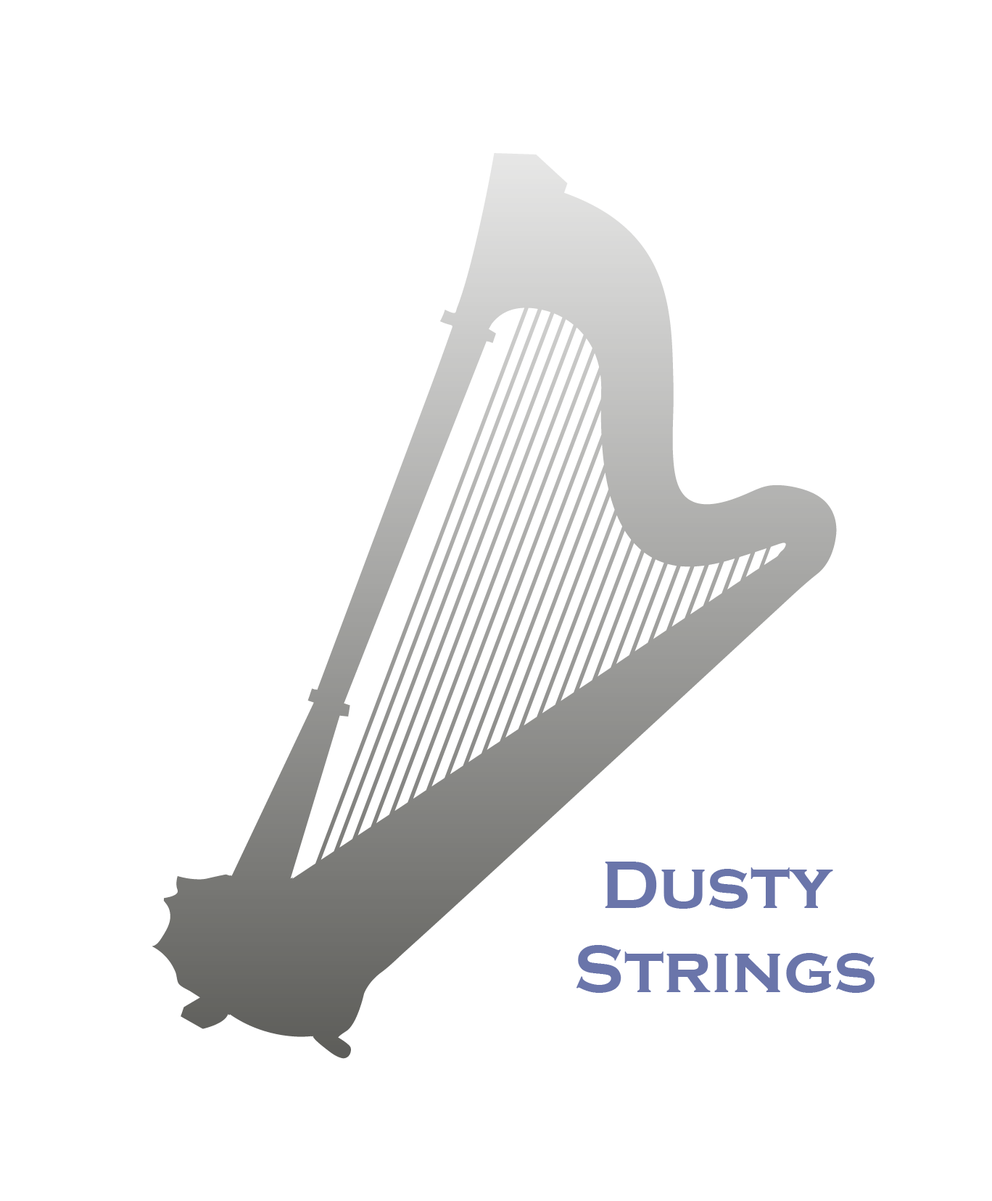
<style>
.page{position:relative;width:992px;height:1201px;background:#ffffff}
.page>*{position:absolute;margin:0}
.t1{font:69.6px "CopperplateGothic-Bold";color:#6a75aa}
</style>
<div class="page">
<p class="t1" style="left:576px;top:862px;width:299px;height:131px;text-align:center">Dusty <br>Strings</p>
</div>
